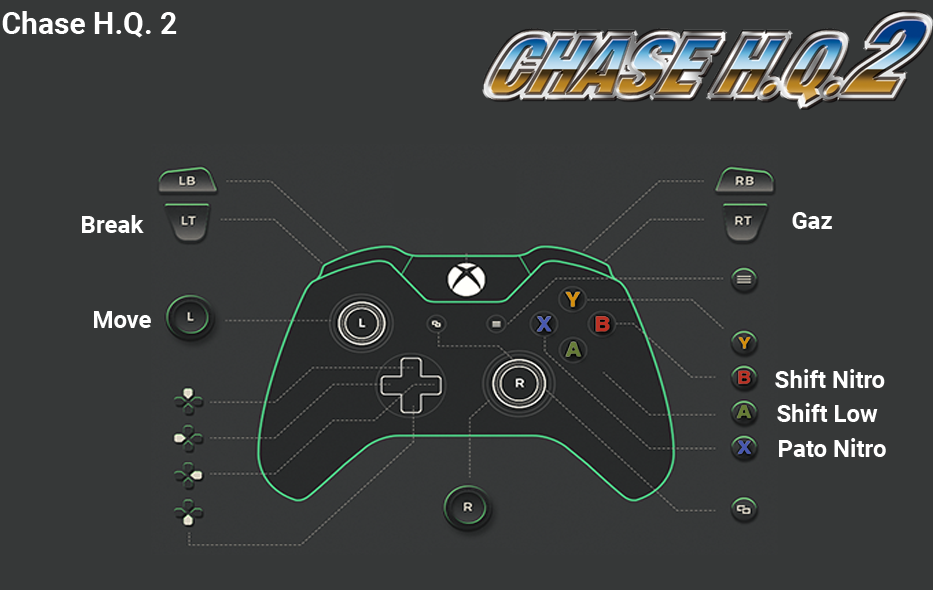
<style>
.page{position:relative;width:933px;height:590px;background:#363838}
.page>*{position:absolute;margin:0}
.t1{font:30px "Roboto-Bold";color:#ffffff}
.t2{font:24px "Roboto-Bold";color:#ffffff}
</style>
<div class="page">
<p class="t1" style="left:2px;top:11px;width:175px;height:27px">Chase H.Q. 2</p>
<p class="t2" style="left:82px;top:215px;width:62px;height:18px">Break</p>
<p class="t2" style="left:792px;top:212px;width:40px;height:17px">Gaz</p>
<p class="t2" style="left:94px;top:311px;width:57px;height:17px">Move</p>
<p class="t2" style="left:775px;top:369px;width:110px;height:19px">Shift Nitro</p>
<p class="t2" style="left:777px;top:403px;width:101px;height:19px">Shift Low</p>
<p class="t2" style="left:779px;top:438px;width:107px;height:19px">Pato Nitro</p>
</div>
